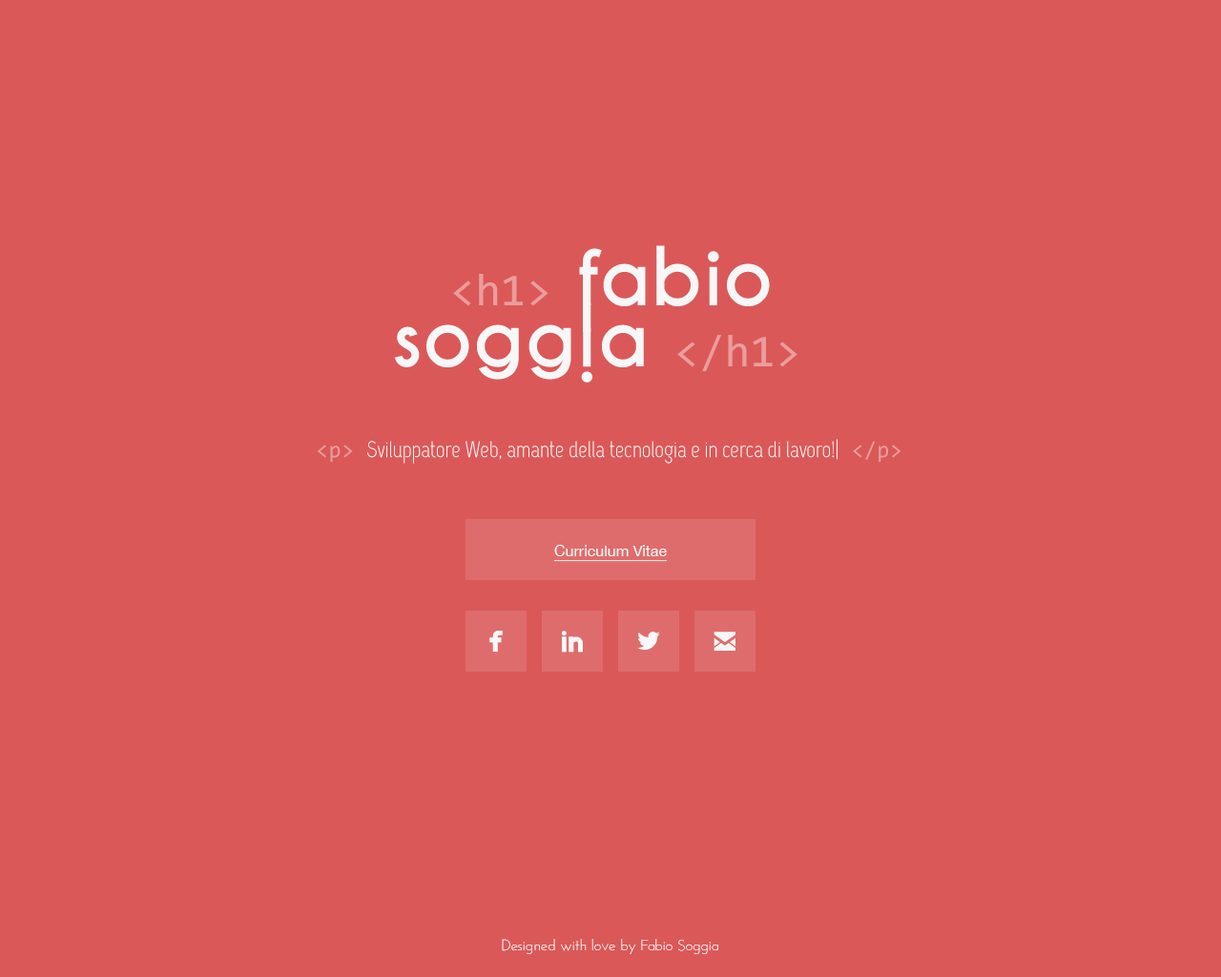
<style>
.page{position:relative;width:1221px;height:977px;background:#db5858}
.page>*{position:absolute;margin:0}
.t1{font:22.9px "Capsuula";color:#f7f7f7}
.t2{font:22.9px "Consolas";color:#ea9d9d}
.t3{font:15.3px "HelveticaNeue";color:#f7f7f7;text-decoration:underline}
.t4{font:45.8px "MonoSocialIconsFont";color:#f7f7f7}
.t5{font:15.3px "JosefinSans-Light";color:#f7f7f7}
</style>
<div class="page">
<p class="t1" style="left:317px;top:439px;width:584px;height:25px"><span class="t2">&lt;p&gt; </span>Sviluppatore Web, amante della tecnologia e in cerca di lavoro!|<span class="t2"> &lt;/p&gt;</span></p>
<p class="t3" style="left:554px;top:545px;width:113px;height:17px">Curriculum Vitae</p>
<p class="t4" style="left:489px;top:630px;width:14px;height:21px">facebook</p>
<p class="t4" style="left:562px;top:630px;width:21px;height:22px">linkedin</p>
<p class="t4" style="left:637px;top:631px;width:23px;height:19px">twitterbird</p>
<p class="t4" style="left:713px;top:631px;width:22px;height:19px">email</p>
<p class="t5" style="left:502px;top:939px;width:216px;height:15px">Designed with love by Fabio Soggia</p>
</div>
